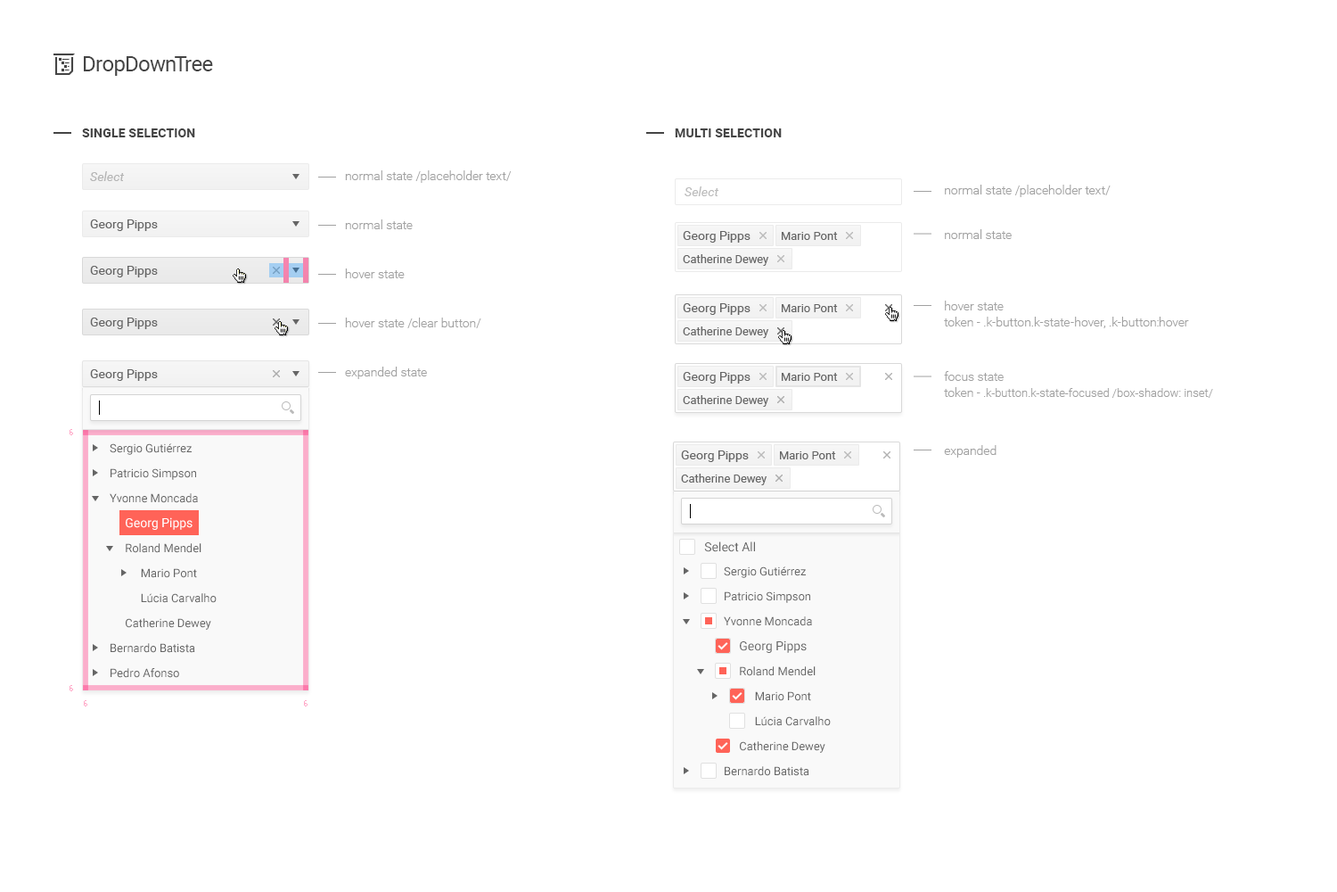
<style>
.page{position:relative;width:1337px;height:892px;background:#ffffff}
.page>*{position:absolute;margin:0}
.t1{font:21.4px "Roboto-Regular";letter-spacing:-0.025em;color:#454545}
.t2{font:12.5px "Roboto-Bold";letter-spacing:0.01em;color:#454545;text-transform:uppercase}
.t3{font:12.5px "Roboto-Italic";color:#b5b5b5}
.t4{font:12.5px/49px "Roboto-Light";color:#a1a1a1}
.t5{font:12.5px/16px "Roboto-Light";color:#a1a1a1}
.t6{font:12.5px/44.6px "Roboto-Light";color:#a1a1a1}
.t7{font:10.7px/16px "Roboto-Light";color:#a1a1a1}
.t8{font:11.6px/16px "Roboto-Light";color:#a1a1a1}
.t9{font:12.5px "Roboto-Italic";color:#bcbcbc}
.t10{font:12.5px "Roboto-Regular";color:#656565}
.t11{font:11.6px "Roboto-Regular";color:#656565}
.t12{font:8px "Tahoma";color:#ffa9c8}
.t13{font:11.6px/25px "Roboto-Regular";color:#656565}
.t14{font:12.5px/17.8px "Roboto-Regular";color:#ffffff}
.t15{font:12.5px/17.8px "Roboto-Regular";color:#656565}
</style>
<div class="page">
<p class="t1" style="left:84px;top:56px;width:129px;height:20px">DropDownTree</p>
<p class="t2" style="left:82px;top:128px;width:113px;height:9px">single selection</p>
<p class="t2" style="left:675px;top:128px;width:107px;height:9px">multi selection</p>
<p class="t3" style="left:90px;top:171px;width:35px;height:10px">Select</p>
<p class="t4" style="left:345px;top:170px;width:167px;height:209px">normal state /placeholder text/<br>normal state<br>hover state<br>hover state /clear button/<br>expanded state</p>
<p class="t5" style="left:944px;top:185px;width:269px;height:272px"><span class="t4">normal state /placeholder text/<br></span><span class="t6">normal state<br>hover state<br></span>token - .k-button.k-state-hover, .k-button:hover<br>focus state<br>token - <span class="t7">.</span><span class="t8">k-button.k-state-focused /box-shadow: inset/<br></span><span class="t6">expanded</span></p>
<p class="t9" style="left:685px;top:186px;width:35px;height:10px">Select</p>
<p class="t10" style="left:90px;top:219px;width:68px;height:12px">Georg Pipps</p>
<p class="t10" style="left:683px;top:231px;width:68px;height:12px">Georg Pipps</p>
<p class="t11" style="left:782px;top:232px;width:56px;height:8px">Mario Pont</p>
<p class="t11" style="left:683px;top:254px;width:86px;height:12px">Catherine Dewey</p>
<p class="t10" style="left:90px;top:266px;width:68px;height:11px">Georg Pipps</p>
<p class="t10" style="left:683px;top:303px;width:68px;height:12px">Georg Pipps</p>
<p class="t11" style="left:782px;top:304px;width:56px;height:8px">Mario Pont</p>
<p class="t10" style="left:90px;top:317px;width:68px;height:12px">Georg Pipps</p>
<p class="t11" style="left:683px;top:326px;width:86px;height:12px">Catherine Dewey</p>
<p class="t10" style="left:90px;top:369px;width:68px;height:12px">Georg Pipps</p>
<p class="t10" style="left:683px;top:372px;width:68px;height:11px">Georg Pipps</p>
<p class="t11" style="left:782px;top:373px;width:56px;height:8px">Mario Pont</p>
<p class="t11" style="left:683px;top:395px;width:86px;height:12px">Catherine Dewey</p>
<p class="t12" style="left:70px;top:429px;width:3px;height:6px">6</p>
<p class="t13" style="left:110px;top:443px;width:107px;height:235px">Sergio Gutiérrez<br>Patricio Simpson<br>Yvonne Moncada<br>     <span class="t14">Georg Pipps<br>     </span>Roland Mendel<br>          Mario Pont<br>          Lúcia Carvalho<br>     Catherine Dewey<br>Bernardo Batista<br>Pedro Afonso</p>
<p class="t10" style="left:681px;top:450px;width:68px;height:12px">Georg Pipps</p>
<p class="t11" style="left:780px;top:451px;width:56px;height:8px">Mario Pont</p>
<p class="t11" style="left:681px;top:473px;width:87px;height:12px">Catherine Dewey</p>
<p class="t10" style="left:704px;top:541px;width:51px;height:11px">Select All</p>
<p class="t13" style="left:724px;top:566px;width:107px;height:210px">Sergio Gutiérrez<br>Patricio Simpson<br>Yvonne Moncada<br>     <span class="t15">Georg Pipps<br>     </span>Roland Mendel<br>          Mario Pont<br>          Lúcia Carvalho<br>     Catherine Dewey<br>Bernardo Batista</p>
<p class="t12" style="left:70px;top:685px;width:3px;height:6px">6</p>
<p class="t12" style="left:84px;top:700px;width:3px;height:6px">6</p>
<p class="t12" style="left:304px;top:700px;width:4px;height:6px">6</p>
</div>
